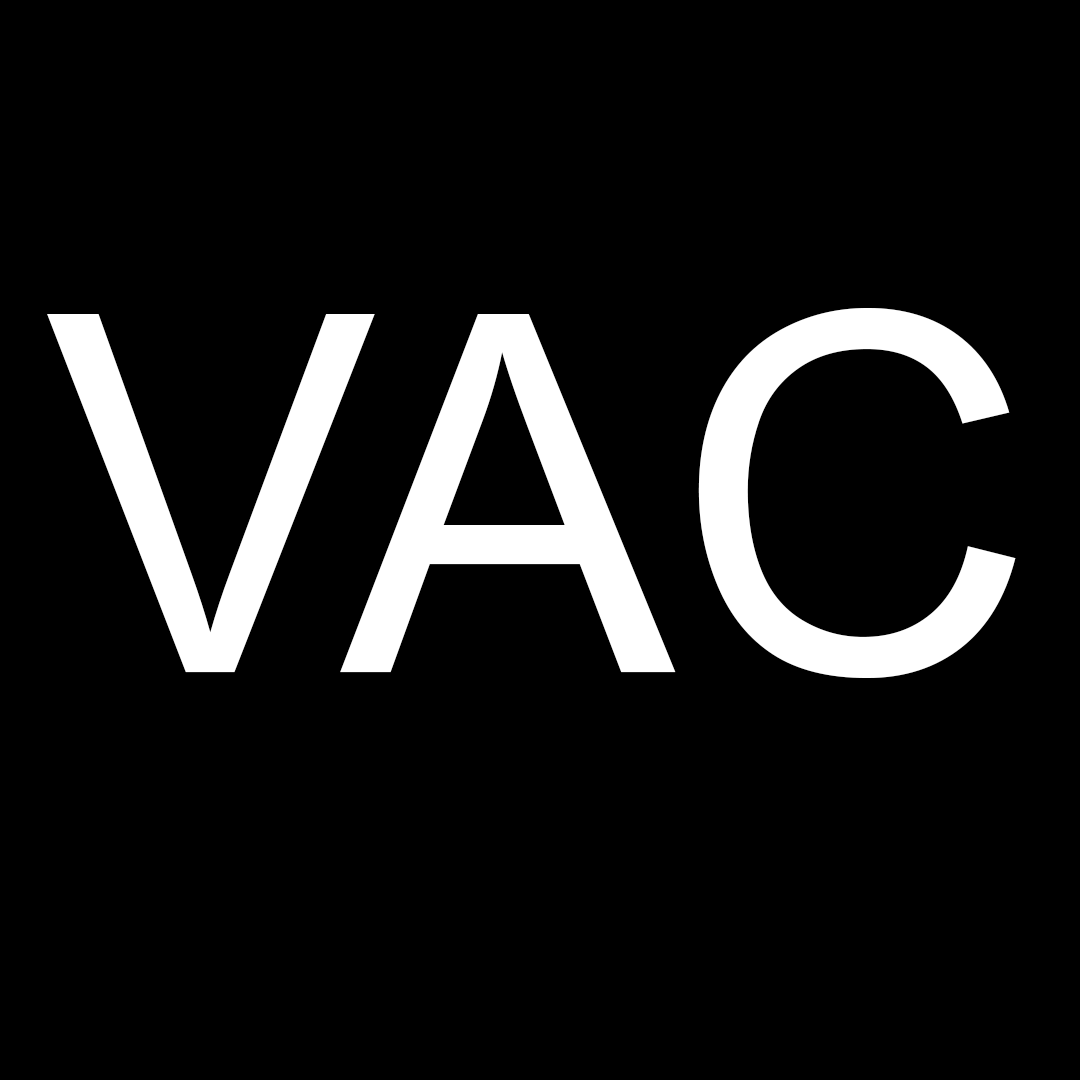
<style>
.page{position:relative;width:1080px;height:1080px;background:#000000}
.page>*{position:absolute;margin:0}
.t1{font:500px "ArialMT";color:#ffffff}
</style>
<div class="page">
<p class="t1" style="left:47px;top:308px;width:969px;height:370px">VAC</p>
</div>
